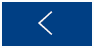
<style>
.page{position:relative;width:94px;height:48px;background:#003f84}
.page>*{position:absolute;margin:0}
.t1{font:33.1px "OratorStd";color:#fcfcfc;scale:1.06 1}
</style>
<div class="page">
<p class="t1" style="left:38px;top:11px;width:15px;height:24px">&lt;</p>
</div>
